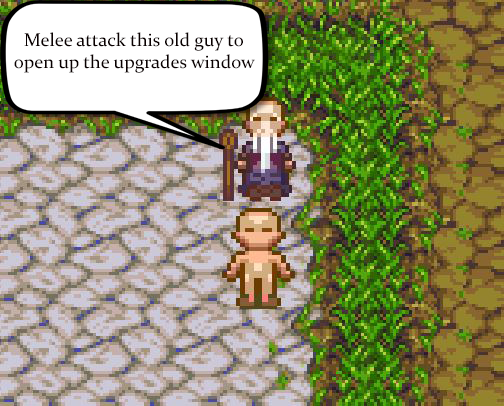
<style>
.page{position:relative;width:504px;height:406px}
.page>*{position:absolute;margin:0}
.t1{font:18.7px "Constantia";color:#090000}
</style>
<div class="page">
<p class="t1" style="left:14px;top:32px;width:241px;height:41px;text-align:center">Melee attack this old guy to<br>open up the upgrades window</p>
</div>
